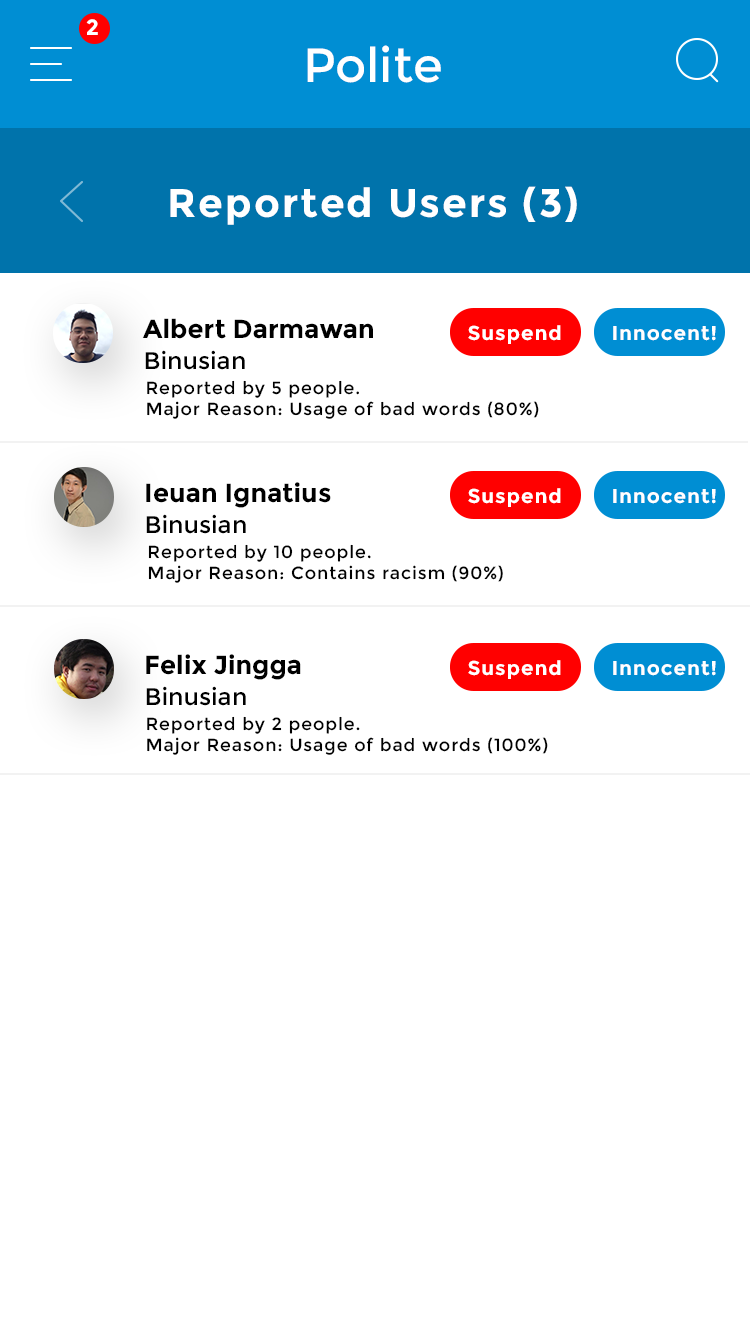
<style>
.page{position:relative;width:750px;height:1334px;background:#ffffff}
.page>*{position:absolute;margin:0}
.t1{font:22px "Montserrat-Bold";letter-spacing:0.05em;color:#ffffff}
.t2{font:48px "Montserrat-Regular";color:#ffffff}
.t3{font:40px "Montserrat-Bold";letter-spacing:0.05em;color:#ffffff}
.t4{font:26px "Montserrat-Bold";color:#000000}
.t5{font:20px "Montserrat-Bold";letter-spacing:0.05em;color:#ffffff}
.t6{font:12px "Montserrat-Regular";color:#000000}
.t7{font:17.6px "Montserrat-Regular";letter-spacing:0.05em;color:#000000}
</style>
<div class="page">
<p class="t1" style="left:86px;top:19px;width:12px;height:16px">2</p>
<p class="t2" style="left:307px;top:45px;width:134px;height:38px">Polite</p>
<p class="t3" style="left:170px;top:186px;width:407px;height:39px">Reported Users (3)</p>
<p class="t4" style="left:142px;top:318px;width:231px;height:21px">Albert Darmawan</p>
<p class="t5" style="left:468px;top:325px;width:93px;height:19px">Suspend</p>
<p class="t5" style="left:613px;top:326px;width:103px;height:15px">Innocent!</p>
<p class="t6" style="left:145px;top:350px;width:100px;height:20px">Binusian</p>
<p class="t7" style="left:147px;top:380px;width:392px;height:39px">Reported by 5 people.<br>Major Reason: Usage of bad words (80%)</p>
<p class="t4" style="left:146px;top:482px;width:185px;height:26px">Ieuan Ignatius</p>
<p class="t5" style="left:468px;top:488px;width:93px;height:19px">Suspend</p>
<p class="t5" style="left:613px;top:489px;width:103px;height:15px">Innocent!</p>
<p class="t6" style="left:146px;top:514px;width:100px;height:20px">Binusian</p>
<p class="t7" style="left:148px;top:544px;width:355px;height:39px">Reported by 10 people.<br>Major Reason: Contains racism (90%)</p>
<p class="t4" style="left:146px;top:654px;width:155px;height:26px">Felix Jingga</p>
<p class="t5" style="left:468px;top:660px;width:93px;height:19px">Suspend</p>
<p class="t5" style="left:613px;top:661px;width:103px;height:15px">Innocent!</p>
<p class="t6" style="left:146px;top:686px;width:100px;height:20px">Binusian</p>
<p class="t7" style="left:147px;top:716px;width:401px;height:39px">Reported by 2 people.<br>Major Reason: Usage of bad words (100%)</p>
</div>
